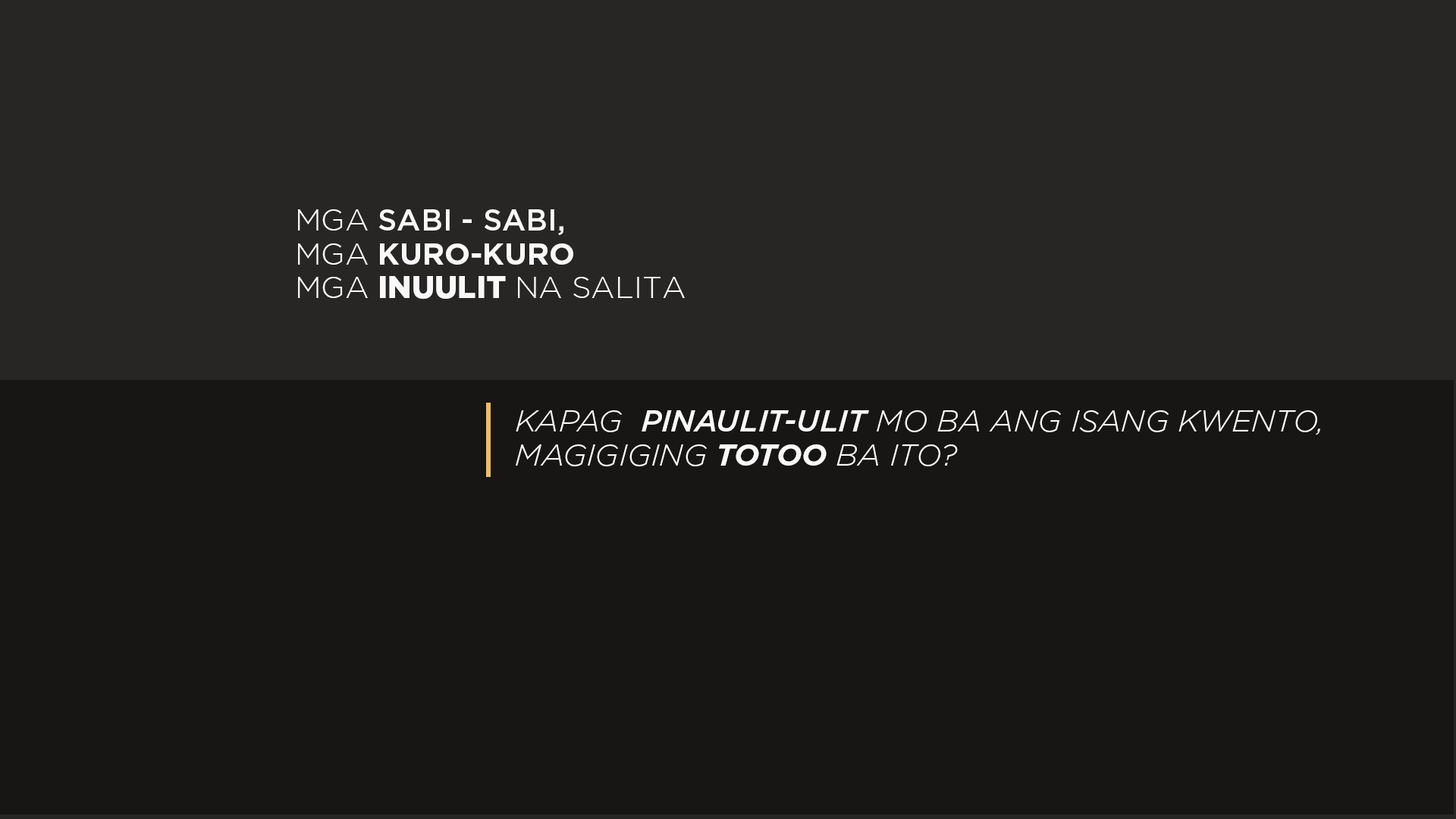
<style>
.page{position:relative;width:1456px;height:819px;background:#171615}
.page>*{position:absolute;margin:0}
.t1{font:30.3px/33.7px "Gotham-Medium";color:#f9f9f9;text-transform:uppercase}
.t2{font:30.3px/33.7px "Gotham-Light";color:#f9f9f9;text-transform:uppercase}
.t3{font:30.3px/33.7px "Gotham-Bold";color:#f9f9f9;text-transform:uppercase}
.t4{font:30.3px/33.7px "Gotham-Black";color:#f9f9f9;text-transform:uppercase}
.t5{font:30.3px/33.7px "Gotham-LightItalic";color:#f9f9f9;text-transform:uppercase}
.t6{font:30.3px/33.7px "Gotham-MediumItalic";color:#f9f9f9;text-transform:uppercase}
.t7{font:30.3px/33.7px "Gotham-BoldItalic";color:#f9f9f9;text-transform:uppercase}
</style>
<div class="page">
<p class="t1" style="left:298px;top:209px;width:387px;height:90px"><span class="t2">Mga </span>sabi - sabi, <br><span class="t2">mga </span><span class="t3">kuro-kuro<br></span><span class="t2">mga </span><span class="t4">inuulit </span><span class="t2">na salita</span></p>
<p class="t5" style="left:516px;top:410px;width:804px;height:56px">kapag  <span class="t6">pinaulit-ulit</span> mo ba ang isang kwento,<br>magigiging <span class="t7">totoo </span>ba ito?</p>
</div>
